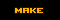
<style>
.page{position:relative;width:60px;height:20px;background:#000000}
.page>*{position:absolute;margin:0}
.t1{font:10px "Acknowledge -BRK-";color:#ffaf02}
</style>
<div class="page">
<p class="t1" style="left:15px;top:8px;width:28px;height:5px">MAKE</p>
</div>
